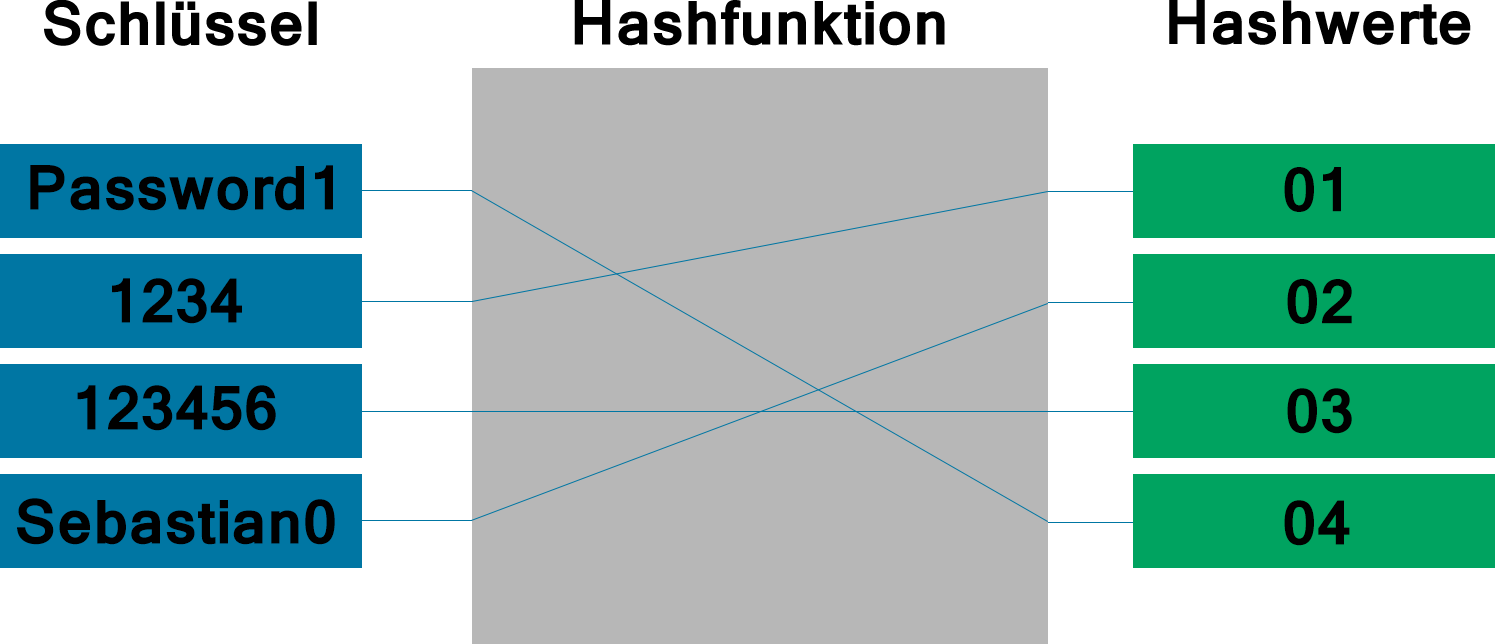
<style>
.page{position:relative;width:1495px;height:644px;background:#ffffff}
.page>*{position:absolute;margin:0}
.t1{font:60px "Kartika-Bold";color:#000000}
</style>
<div class="page">
<p class="t1" style="left:44px;top:0px;width:273px;height:46px">Schlüssel</p>
<p class="t1" style="left:574px;top:0px;width:371px;height:46px">Hashfunktion</p>
<p class="t1" style="left:1169px;top:0px;width:302px;height:45px">Hashwerte</p>
<p class="t1" style="left:30px;top:165px;width:303px;height:46px">Password1</p>
<p class="t1" style="left:1284px;top:167px;width:57px;height:45px">01</p>
<p class="t1" style="left:112px;top:278px;width:130px;height:46px">1234</p>
<p class="t1" style="left:1287px;top:279px;width:65px;height:45px">02</p>
<p class="t1" style="left:77px;top:385px;width:199px;height:46px">123456</p>
<p class="t1" style="left:1287px;top:388px;width:65px;height:46px">03</p>
<p class="t1" style="left:17px;top:498px;width:318px;height:47px">Sebastian0</p>
<p class="t1" style="left:1284px;top:500px;width:66px;height:46px">04</p>
</div>
